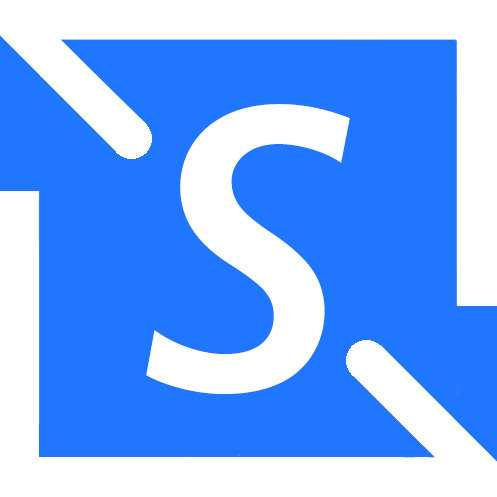
<style>
.page{position:relative;width:497px;height:497px;background:#2176ff}
.page>*{position:absolute;margin:0}
.t1{font:400px "SegoeUI-SemiboldItalic";color:#ffffff}
</style>
<div class="page">
<p class="t1" style="left:146px;top:104px;width:204px;height:290px">S</p>
</div>
